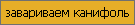
<style>
.page{position:relative;width:135px;height:25px;background:#e6ae28}
.page>*{position:absolute;margin:0}
.t1{font:12px "Tahoma";color:#000000}
</style>
<div class="page">
<p class="t1" style="left:6px;top:7px;width:123px;height:12px">завариваем канифоль</p>
</div>
